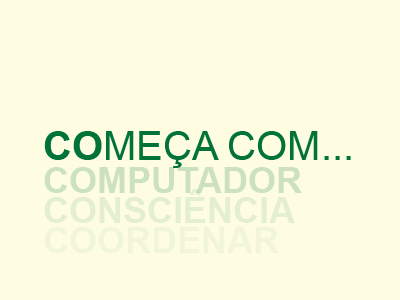
<style>
.page{position:relative;width:400px;height:300px;background:#fefde2}
.page>*{position:absolute;margin:0}
.t1{font:40px "ArialMT";color:#017338}
.t2{font:40px "Arial-BoldMT";color:#017338}
.t3{font:36px "Arial-BoldMT";color:#cbe1c0}
.t4{font:36px "Arial-BoldMT";color:#e4efd1}
.t5{font:36px "Arial-BoldMT";color:#f1f6d9}
</style>
<div class="page">
<p class="t1" style="left:44px;top:131px;width:307px;height:37px"><span class="t2">CO</span>MEÇA COM...</p>
<p class="t3" style="left:44px;top:167px;width:258px;height:26px">COMPUTADOR</p>
<p class="t4" style="left:44px;top:189px;width:251px;height:34px">CONSCIÊNCIA</p>
<p class="t5" style="left:44px;top:227px;width:235px;height:26px">COORDENAR</p>
</div>
